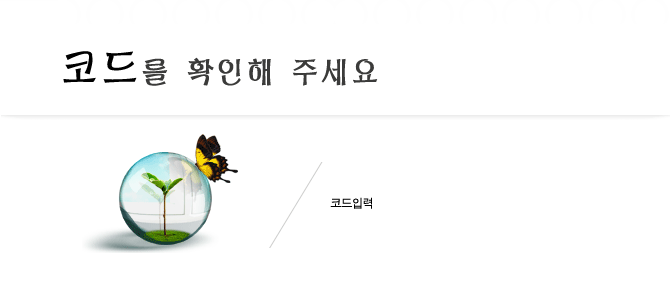
<style>
.page{position:relative;width:670px;height:288px;background:#ffffff}
.page>*{position:absolute;margin:0}
.t1{font:30px "NamuR-HM";color:#3b3b3a}
.t2{font:40px "NamuR-HM";color:#000000}
.t3{font:12px "SandJg";color:#000000}
</style>
<div class="page">
<p class="t1" style="left:63px;top:51px;width:315px;height:35px"><span class="t2">코드</span>를 확인해 주세요</p>
<p class="t3" style="left:330px;top:197px;width:42px;height:12px">코드입력</p>
</div>
